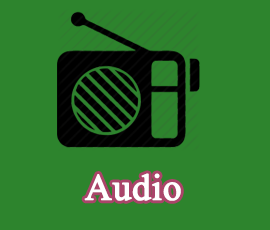
<style>
.page{position:relative;width:270px;height:230px;background:#2d842d}
.page>*{position:absolute;margin:0}
.t1{font:37px "TimesNewRomanPSMT";color:#ffffff;font-weight:bold}
</style>
<div class="page">
<p class="t1" style="left:84px;top:173px;width:97px;height:28px">Audio</p>
</div>
